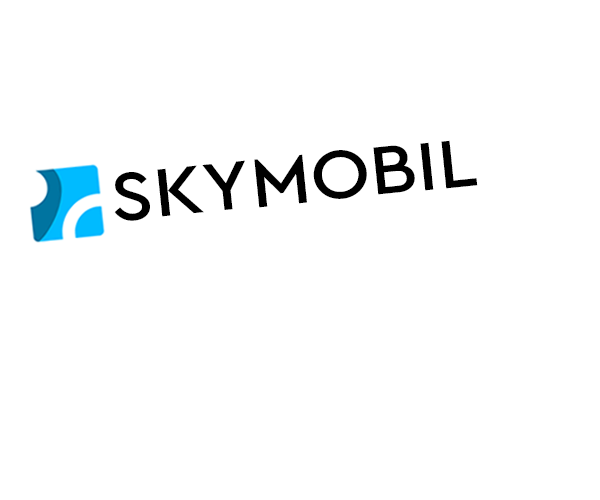
<style>
.page{position:relative;width:600px;height:500px;background:#ffffff}
.page>*{position:absolute;margin:0}
.t1{font:71.5px "CeraPROModern-Medium";color:#000000;scale:1.07 1}
</style>
<div class="page">
<p class="t1" style="left:114px;top:140px;width:364px;height:81px;rotate:-6deg">SKYMOBIL</p>
</div>
